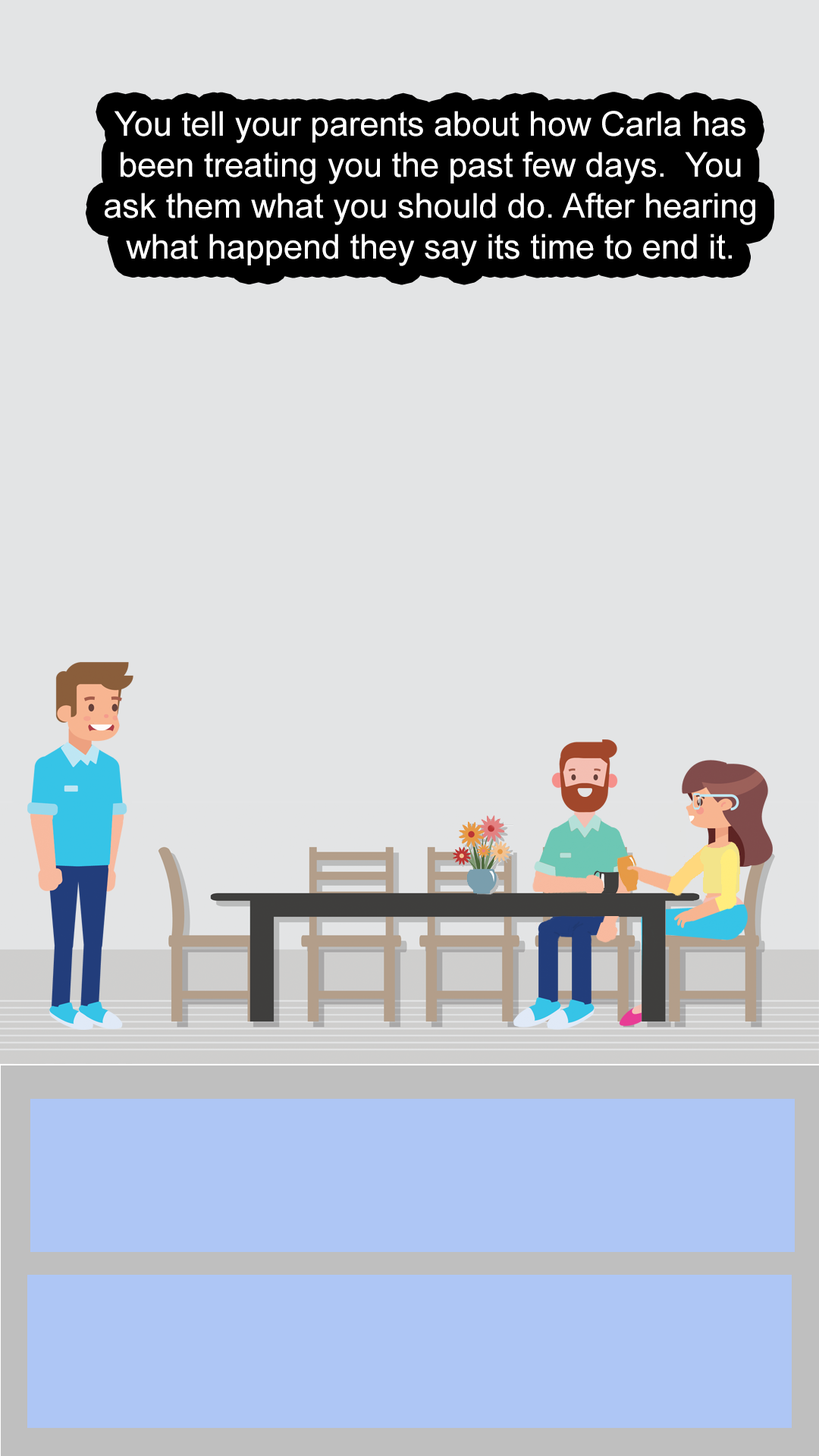
<style>
.page{position:relative;width:819px;height:1456px;background:#e3e4e5}
.page>*{position:absolute;margin:0}
.t1{font:34.1px "ArialMT";color:#ffffff}
</style>
<div class="page">
<p class="t1" style="left:105px;top:111px;width:650px;height:155px;text-align:center">You tell your parents about how Carla has been treating you the past few days.  You ask them what you should do. After hearing what happend they say its time to end it.</p>
</div>
